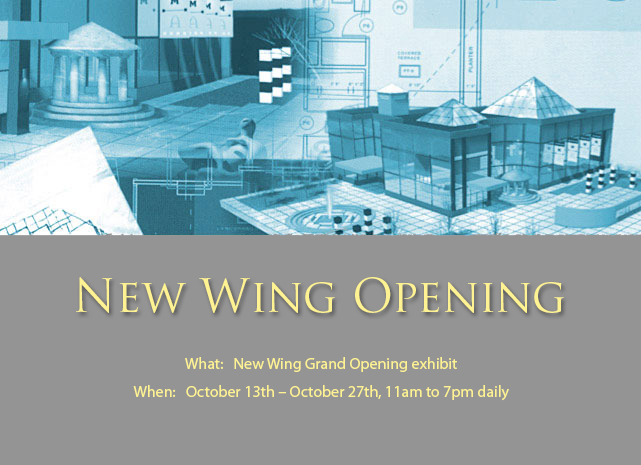
<style>
.page{position:relative;width:641px;height:465px;background:#949494}
.page>*{position:absolute;margin:0}
.t1{font:45px "TrajanPro-Regular";color:#fef293}
.t2{font:16px/28px "MyriadPro-Regular";color:#fef292}
</style>
<div class="page">
<p class="t1" style="left:76px;top:277px;width:488px;height:36px">New Wing Opening</p>
<p class="t2" style="left:133px;top:357px;width:376px;height:44px;text-align:center">What:   New Wing Grand Opening exhibit<br>When:   October 13th – October 27th, 11am to 7pm daily</p>
</div>
